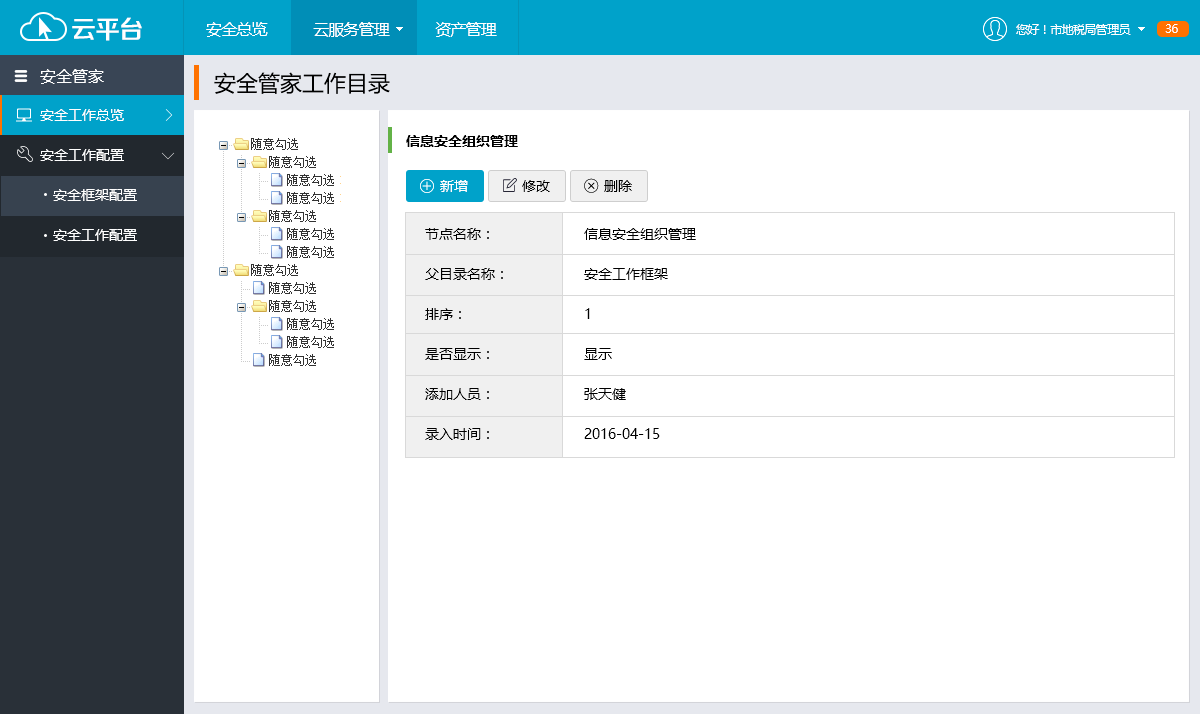
<style>
.page{position:relative;width:1200px;height:714px;background:#ffffff}
.page>*{position:absolute;margin:0}
.t1{font:25.4px "FZZZHONGJW--GB1-0";letter-spacing:-0.05em;color:#ffffff}
.t2{font:16px "MicrosoftYaHei";letter-spacing:-0.05em;color:#ffffff}
.t3{font:12px "MicrosoftYaHei";letter-spacing:-0.05em;color:#ffffff}
.t4{font:16px "MicrosoftYaHei";color:#ffffff}
.t5{font:22px "MicrosoftYaHei";color:#000000}
.t6{font:14px "MicrosoftYaHei";color:#ffffff}
.t7{font:14px "MicrosoftYaHei-Bold";color:#000000}
.t8{font:14px "MicrosoftYaHei";color:#000000}
.t9{font:14px/40px "MicrosoftYaHei";color:#ffffff}
.t10{font:14px/40px "MicrosoftYaHei";color:#000000}
</style>
<div class="page">
<p class="t1" style="left:72px;top:17px;width:70px;height:24px">云平台</p>
<p class="t2" style="left:206px;top:22px;width:291px;height:15px">安全总览           云服务管理           资产管理</p>
<p class="t3" style="left:1016px;top:24px;width:115px;height:11px">您好！市地税局管理员</p>
<p class="t3" style="left:1165px;top:24px;width:13px;height:9px">36</p>
<p class="t4" style="left:40px;top:69px;width:64px;height:15px">安全管家</p>
<p class="t5" style="left:214px;top:72px;width:176px;height:22px">安全管家工作目录</p>
<p class="t6" style="left:40px;top:109px;width:84px;height:12px">安全工作总览</p>
<p class="t7" style="left:406px;top:135px;width:112px;height:12px">信息安全组织管理</p>
<p class="t6" style="left:40px;top:149px;width:84px;height:12px">安全工作配置</p>
<p class="t6" style="left:440px;top:180px;width:28px;height:12px">新增</p>
<p class="t8" style="left:522px;top:180px;width:28px;height:12px">修改</p>
<p class="t8" style="left:604px;top:180px;width:28px;height:12px">删除</p>
<p class="t9" style="left:53px;top:189px;width:84px;height:52px">安全框架配置<br>安全工作配置</p>
<p class="t10" style="left:425px;top:228px;width:78px;height:212px">节点名称：<br>父目录名称：<br>排序：<br>是否显示：<br>添加人员：<br>录入时间：</p>
<p class="t10" style="left:584px;top:228px;width:112px;height:211px">信息安全组织管理<br>安全工作框架<br>1<br>显示<br>张天健<br>2016-04-15</p>
</div>
